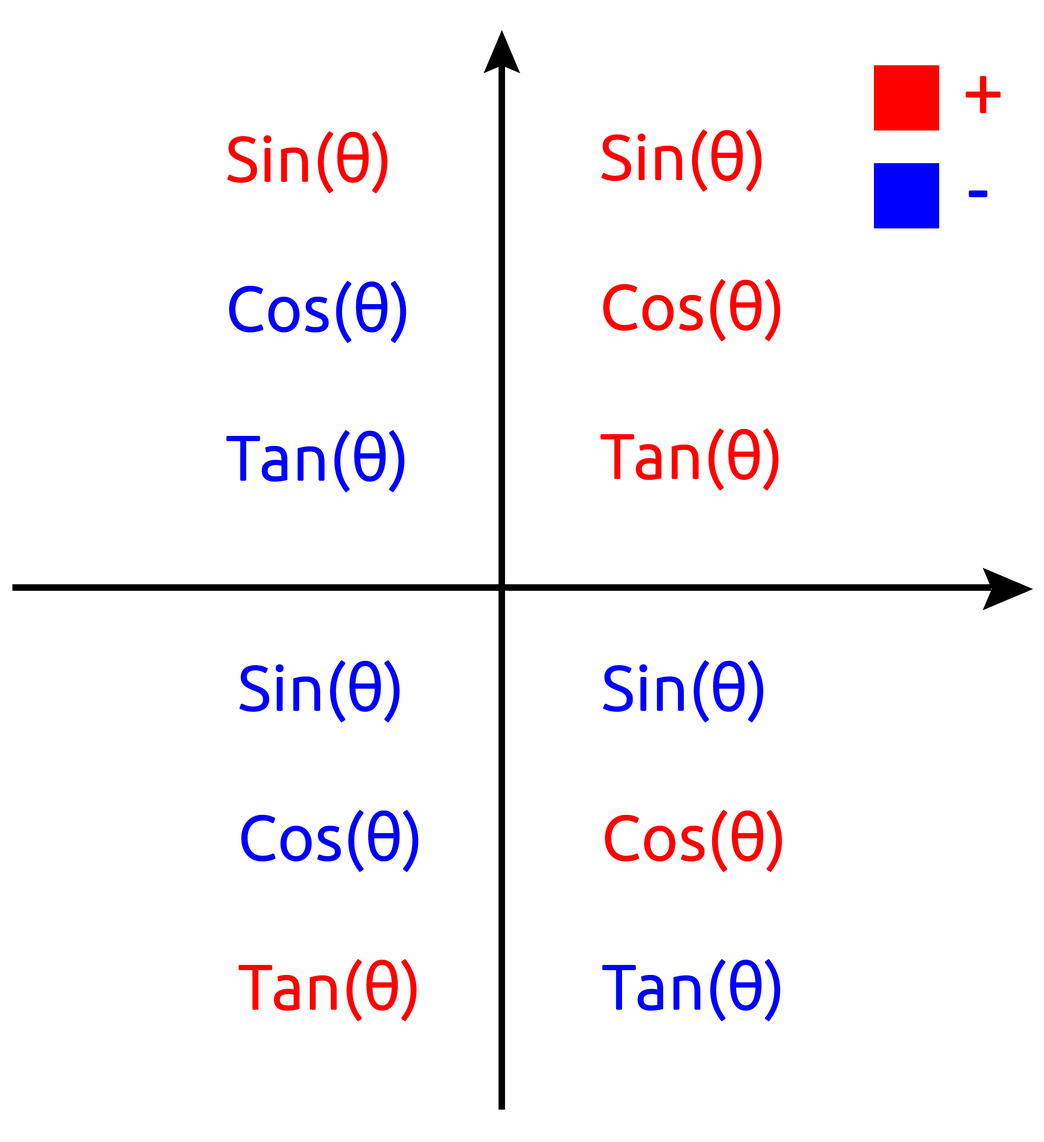
<style>
.page{position:relative;width:1044px;height:1142px;background:#ffffff}
.page>*{position:absolute;margin:0}
.t1{font:72.5px "Ubuntu-Light";color:#ff0000;font-weight:bold}
.t2{font:62.3px "Ubuntu-Light";color:#0000ff;font-weight:bold}
.t3{font:62.3px "Ubuntu-Light";color:#ff0000;font-weight:bold}
.t4{font:72.5px "Ubuntu-Light";color:#0000ff;font-weight:bold}
</style>
<div class="page">
<p class="t1" style="left:966px;top:76px;width:35px;height:38px">+</p>
<p class="t2" style="left:226px;top:131px;width:180px;height:361px"><span class="t3">Sin(θ)<br><br></span>Cos(θ)<br><br>Tan(θ)</p>
<p class="t3" style="left:600px;top:129px;width:180px;height:362px">Sin(θ)<br><br>Cos(θ)<br><br>Tan(θ)</p>
<p class="t4" style="left:969px;top:190px;width:19px;height:8px">-</p>
<p class="t2" style="left:238px;top:660px;width:181px;height:362px">Sin(θ)<br><br>Cos(θ)<br><br><span class="t3">Tan(θ)</span></p>
<p class="t2" style="left:602px;top:660px;width:180px;height:362px">Sin(θ)<br><br><span class="t3">Cos(θ)<br><br></span>Tan(θ)</p>
</div>
